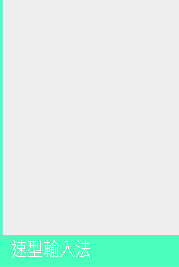
<style>
.page{position:relative;width:179px;height:267px;background:#eeeeee}
.page>*{position:absolute;margin:0}
.t1{font:18.7px "MicrosoftJhengHeiRegular";color:#ffffff;scale:0.87 1}
</style>
<div class="page">
<p class="t1" style="left:12px;top:240px;width:78px;height:18px">速型輸入法</p>
</div>
